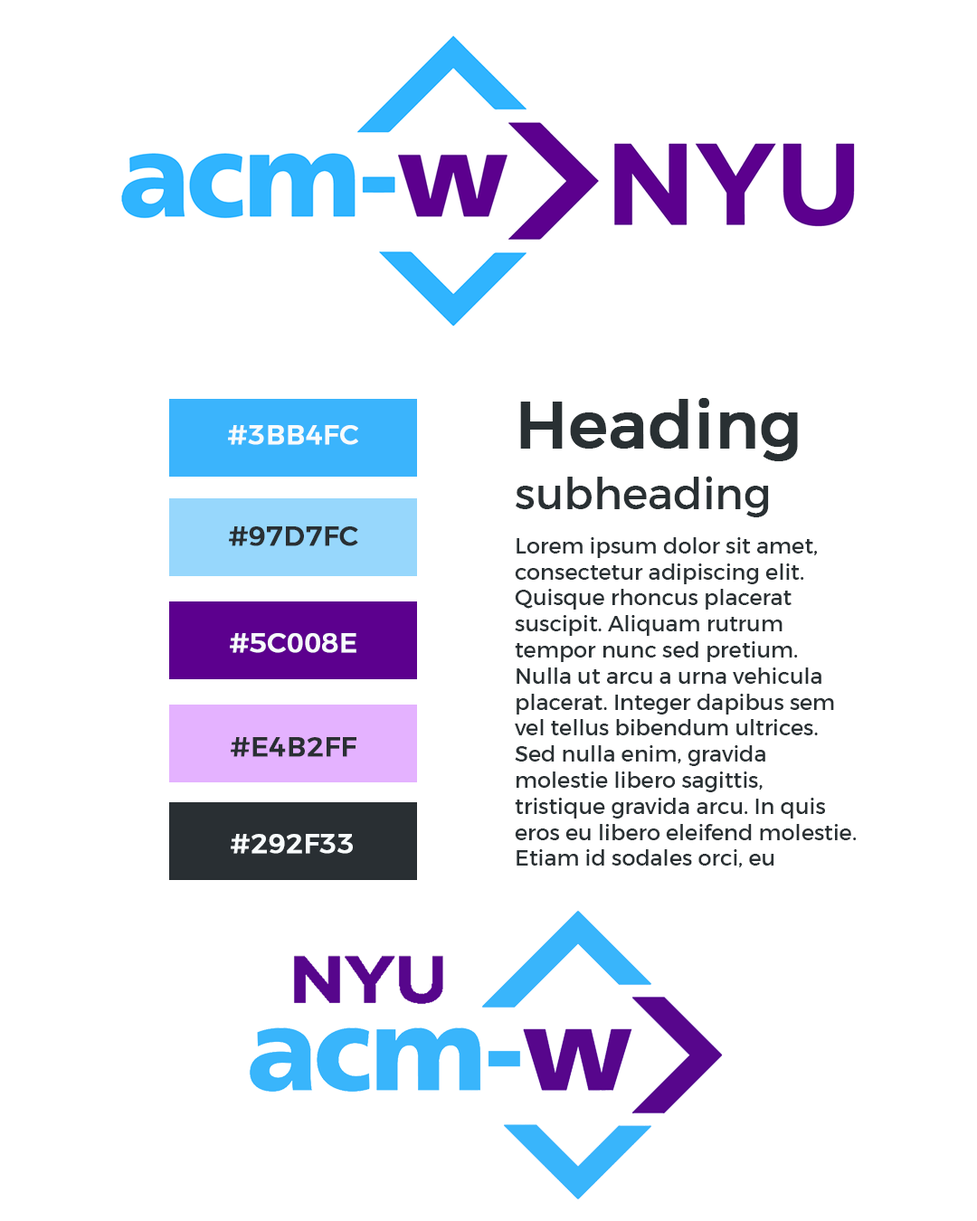
<style>
.page{position:relative;width:977px;height:1221px;background:#ffffff}
.page>*{position:absolute;margin:0}
.t1{font:65.1px "Montserrat-Regular";color:#293033;font-weight:bold}
.t2{font:27.1px "Montserrat-Regular";color:#f7fbfc;font-weight:bold}
.t3{font:43.4px "Montserrat-Regular";color:#293033}
.t4{font:27.1px "Montserrat-Regular";color:#292f33;font-weight:bold}
.t5{font:21.7px "Montserrat-Regular";color:#293033}
</style>
<div class="page">
<p class="t1" style="left:520px;top:398px;width:278px;height:63px">Heading</p>
<p class="t2" style="left:228px;top:425px;width:130px;height:20px">#3BB4FC</p>
<p class="t3" style="left:515px;top:476px;width:254px;height:41px">subheading</p>
<p class="t4" style="left:229px;top:526px;width:129px;height:20px">#97D7FC</p>
<p class="t5" style="left:515px;top:537px;width:341px;height:330px">Lorem ipsum dolor sit amet, consectetur adipiscing elit. Quisque rhoncus placerat suscipit. Aliquam rutrum tempor nunc sed pretium. Nulla ut arcu a urna vehicula placerat. Integer dapibus sem vel tellus bibendum ultrices. Sed nulla enim, gravida molestie libero sagittis, tristique gravida arcu. In quis eros eu libero eleifend molestie. Etiam id sodales orci, eu</p>
<p class="t2" style="left:230px;top:633px;width:126px;height:20px">#5C008E</p>
<p class="t4" style="left:231px;top:737px;width:125px;height:20px">#E4B2FF</p>
<p class="t2" style="left:231px;top:834px;width:122px;height:20px">#292F33</p>
</div>
